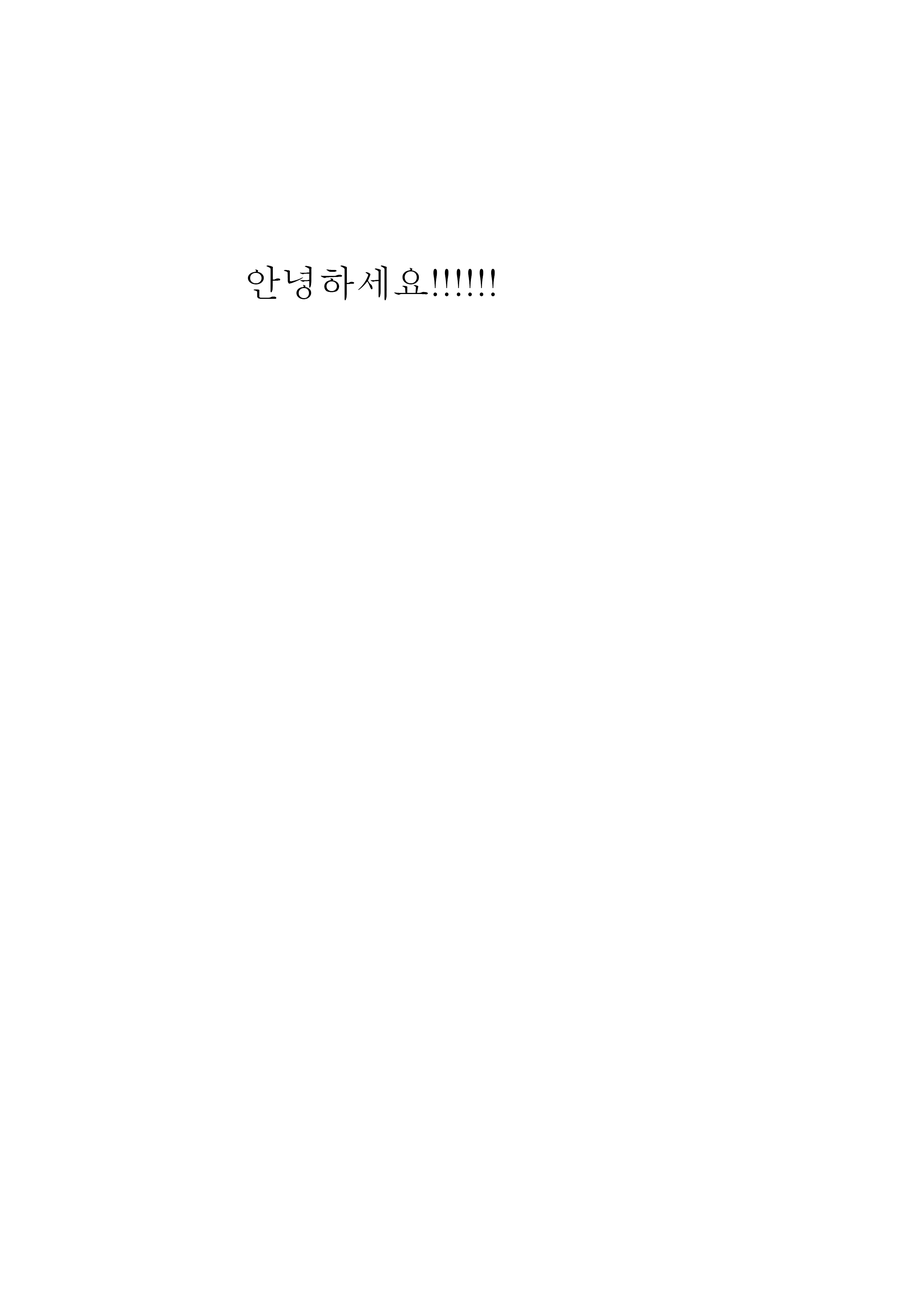
<style>
.page{position:relative;width:918px;height:1299px;background:#ffffff}
.page>*{position:absolute;margin:0}
.t1{font:37px "Batang";color:#000000}
</style>
<div class="page">
<p class="t1" style="left:248px;top:265px;width:247px;height:35px">안녕하세요!!!!!!</p>
</div>
